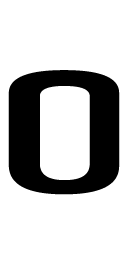
<style>
.page{position:relative;width:128px;height:256px;background:#ffffff}
.page>*{position:absolute;margin:0}
.t1{font:159.5px "LicensePlate";letter-spacing:0.2em;color:#000000;scale:2.1 1}
</style>
<div class="page">
<p class="t1" style="left:8px;top:70px;width:112px;height:125px">0</p>
</div>
